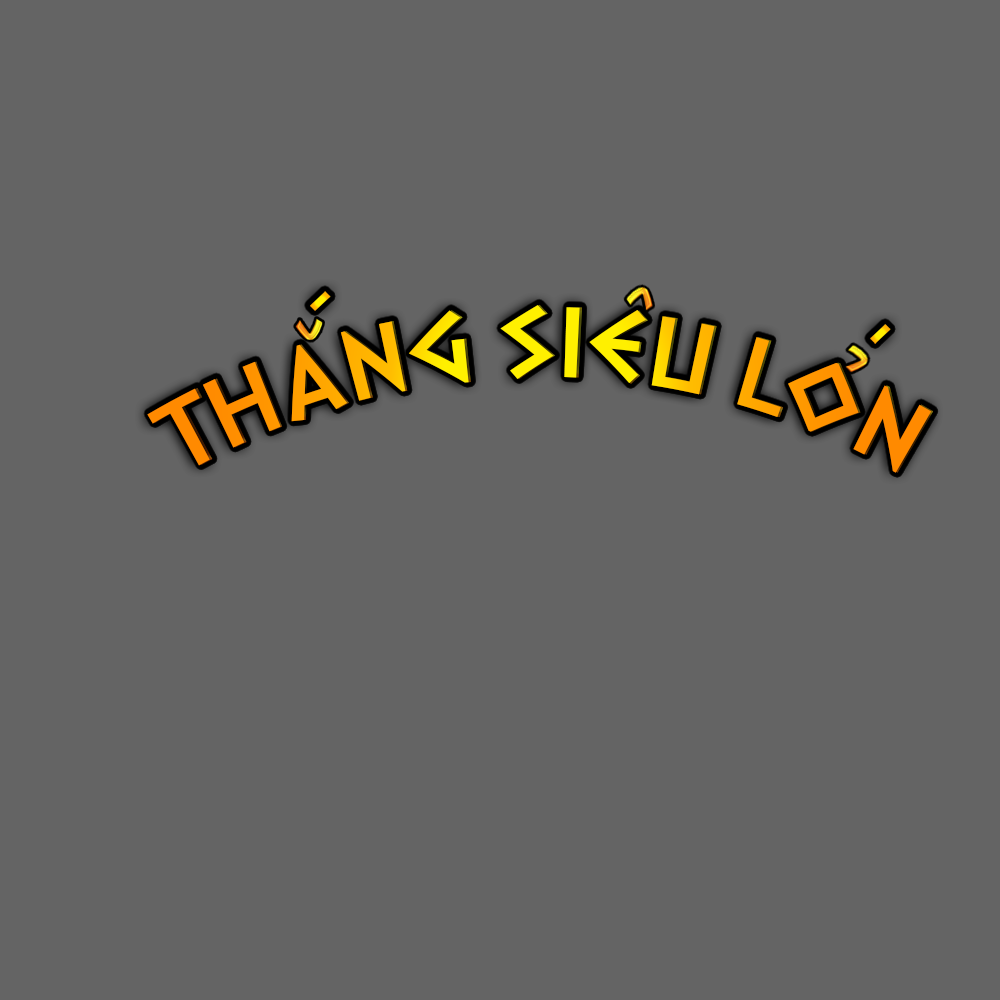
<style>
.page{position:relative;width:1000px;height:1000px;background:#646464}
.page>*{position:absolute;margin:0}
.t1{font:83.8px/181.5px "DalekPinpointBold";text-transform:uppercase}
.t2{font:83.8px/219.2px "DalekPinpointBold";text-transform:uppercase}
</style>
<div class="page">
<p class="t1" style="left:147px;top:305px;width:785px;height:168px">thang sieu lon</p>
<p class="t2" style="left:149px;top:304px;width:785px;height:169px">thang sieu lon</p>
</div>
